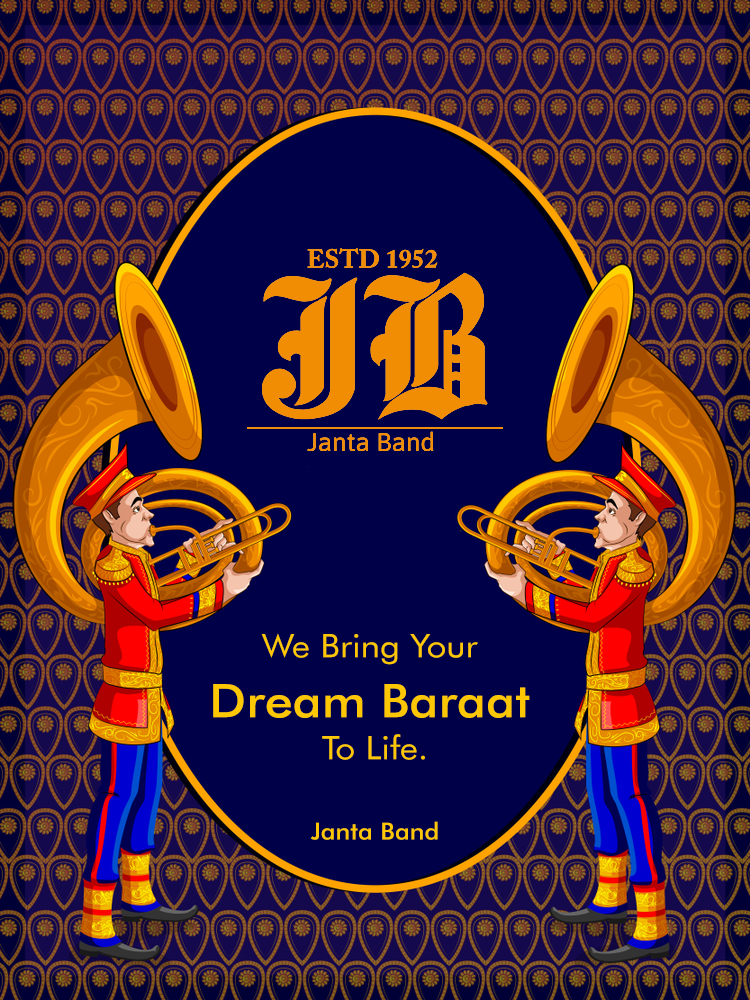
<style>
.page{position:relative;width:750px;height:1000px;background:#000048}
.page>*{position:absolute;margin:0}
.t1{font:32.5px "FuturaBT-Book";color:#fec703;scale:1.08 1}
.t2{font:46.5px "FuturaBT-Medium";color:#fec703;scale:1.08 1}
.t3{font:23.6px "FuturaBT-Medium";color:#fec703;scale:1.08 1}
</style>
<div class="page">
<p class="t1" style="left:213px;top:633px;width:317px;height:127px;text-align:center">We Bring Your <br><span class="t2">Dream Baraat <br></span>To Life.</p>
<p class="t3" style="left:310px;top:821px;width:128px;height:19px">Janta Band</p>
</div>
